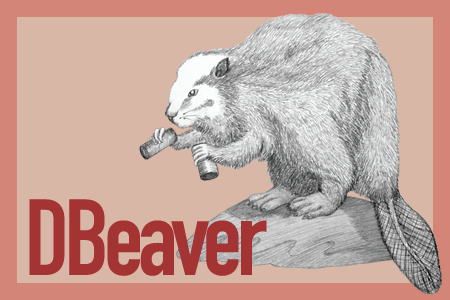
<style>
.page{position:relative;width:450px;height:300px;background:#d9b7a7}
.page>*{position:absolute;margin:0}
.t1{font:106.1px "DINEngschrift";letter-spacing:-0.05em;color:#a43334}
</style>
<div class="page">
<p class="t1" style="left:29px;top:199px;width:238px;height:77px">DBeaver</p>
</div>
